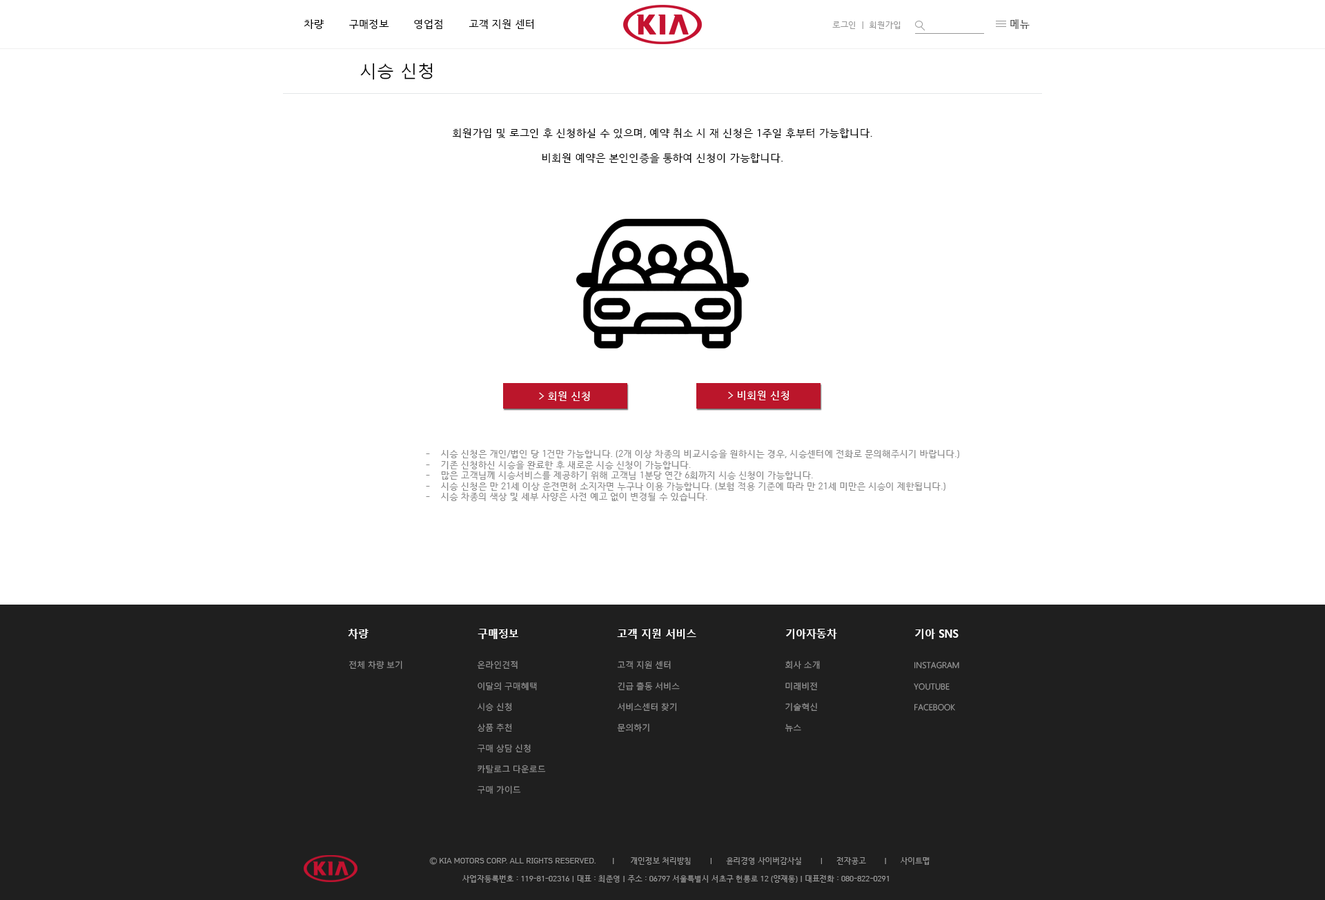
<style>
.page{position:relative;width:1325px;height:900px;background:#ffffff}
.page>*{position:absolute;margin:0}
.t1{font:10.4px "HCRDotum";color:#000000}
.t2{font:8.3px "HCRDotum";color:#979797}
.t3{font:10.4px "HCRDotum";color:#4c4c4c}
.t4{font:17.2px "MalgunGothic";color:#000000}
.t5{font:10.5px "HCRDotum";color:#000000}
.t6{font:10.4px "HCRDotum";color:#ffffff}
.t7{font:9px "HCRDotum";color:#888888}
.t8{font:10.7px "MalgunGothicBold";color:#ffffff;scale:0.96 1}
.t9{font:8.3px "MalgunGothic-Semilight";color:#979797}
.t10{font:8.3px/20.8px "MalgunGothic-Semilight";color:#979797}
.t11{font:7.6px "HCRDotum";color:#999999}
</style>
<div class="page">
<p class="t1" style="left:304px;top:19px;width:229px;height:10px">차량        구매정보        영업점        고객 지원 센터</p>
<p class="t2" style="left:832px;top:21px;width:69px;height:8px">로그인  |  회원가입</p>
<p class="t3" style="left:1010px;top:19px;width:20px;height:10px">메뉴</p>
<p class="t4" style="left:360px;top:63px;width:73px;height:17px">시승 신청</p>
<p class="t5" style="left:453px;top:128px;width:419px;height:36px;text-align:center">회원가입 및 로그인 후 신청하실 수 있으며, 예약 취소 시 재 신청은 1주일 후부터 가능합니다.<br><br>비회원 예약은 본인인증을 통하여 신청이 가능합니다.</p>
<p class="t6" style="left:539px;top:391px;width:51px;height:10px">&gt; 회원 신청</p>
<p class="t6" style="left:728px;top:391px;width:61px;height:9px">&gt; 비회원 신청</p>
<p class="t7" style="left:426px;top:449px;width:533px;height:53px">-    시승 신청은 개인/법인 당 1건만 가능합니다. (2개 이상 차종의 비교시승을 원하시는 경우, 시승센터에 전화로 문의해주시기 바랍니다.)<br>-    기존 신청하신 시승을 완료한 후 새로운 시승 신청이 가능합니다.<br>-    많은 고객님께 시승서비스를 제공하기 위해 고객님 1분당 연간 6회까지 시승 신청이 가능합니다.<br>-    시승 신청은 만 21세 이상 운전면허 소지자면 누구나 이용 가능합니다. (보험 적용 기준에 따라 만 21세 미만은 시승이 제한됩니다.)<br>-    시승 차종의 색상 및 세부 사양은 사전 예고 없이 변경될 수 있습니다.</p>
<p class="t8" style="left:348px;top:629px;width:21px;height:10px">차량</p>
<p class="t8" style="left:478px;top:629px;width:40px;height:10px">구매정보</p>
<p class="t8" style="left:617px;top:629px;width:79px;height:10px">고객 지원 서비스</p>
<p class="t8" style="left:786px;top:629px;width:51px;height:10px">기아자동차</p>
<p class="t8" style="left:915px;top:629px;width:44px;height:10px">기아 SNS</p>
<p class="t9" style="left:349px;top:660px;width:53px;height:9px">전체 차량 보기</p>
<p class="t10" style="left:477px;top:660px;width:69px;height:134px">온라인견적<br>이달의 구매혜택<br>시승 신청<br>상품 추천<br>구매 상담 신청<br>카탈로그 다운로드<br>구매 가이드</p>
<p class="t10" style="left:617px;top:660px;width:63px;height:72px">고객 지원 센터<br>긴급 출동 서비스<br>서비스센터 찾기<br>문의하기</p>
<p class="t10" style="left:785px;top:660px;width:35px;height:72px">회사 소개<br>미래비전<br>기술혁신<br>뉴스</p>
<p class="t10" style="left:914px;top:662px;width:45px;height:49px">INSTAGRAM<br>YOUTUBE<br>FACEBOOK</p>
<p class="t11" style="left:429px;top:857px;width:501px;height:8px">Ⓒ KIA MOTORS CORP. ALL RIGHTS RESERVED.       |       개인정보 처리방침        |      윤리경영 사이버감사실        |      전자공고        |      사이트맵</p>
<p class="t11" style="left:462px;top:875px;width:427px;height:8px">사업자등록번호 : 119-81-02316 | 대표 : 최준영 | 주소 : 06797 서울특별시 서초구 헌릉로 12 (양재동) | 대표전화 : 080-822-0291</p>
</div>
